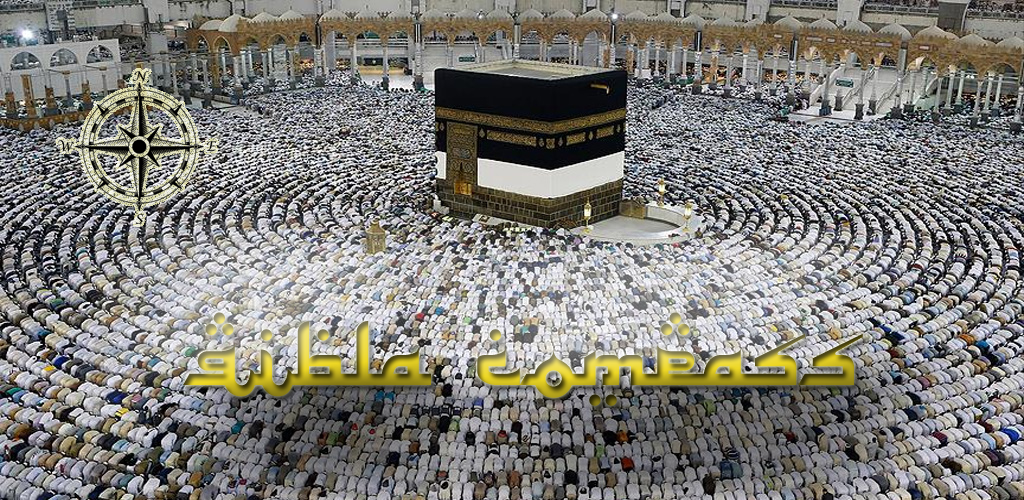
<style>
.page{position:relative;width:1024px;height:500px}
.page>*{position:absolute;margin:0}
.t1{font:75px "Alhambra"}
</style>
<div class="page">
<p class="t1" style="left:183px;top:312px;width:680px;height:94px">Qibla Compass</p>
</div>
